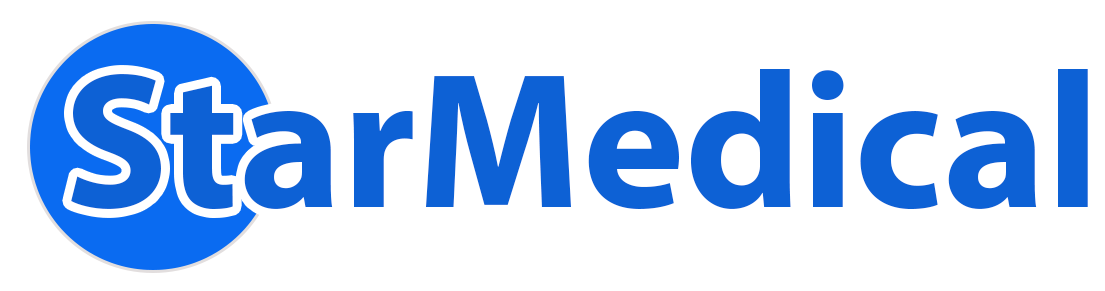
<style>
.page{position:relative;width:1105px;height:291px;background:#ffffff}
.page>*{position:absolute;margin:0}
.t1{font:195px "MyriadPro-Bold";color:#0d61d5}
</style>
<div class="page">
<p class="t1" style="left:71px;top:69px;width:1017px;height:140px">StarMedical</p>
</div>
